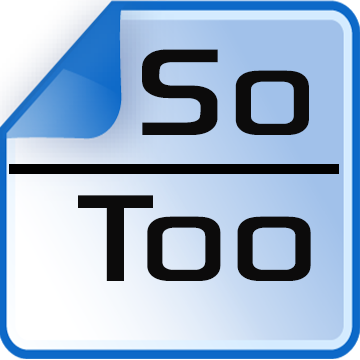
<style>
.page{position:relative;width:360px;height:360px}
.page>*{position:absolute;margin:0}
.t1{font:175px "SonySketchEF";color:#0c0b0b}
</style>
<div class="page">
<p class="t1" style="left:142px;top:49px;width:167px;height:86px">So</p>
<p class="t1" style="left:78px;top:195px;width:233px;height:86px">Too</p>
</div>
